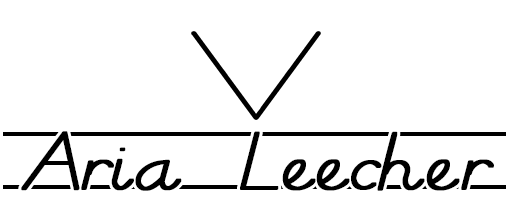
<style>
.page{position:relative;width:512px;height:216px;background:#ffffff}
.page>*{position:absolute;margin:0}
.t1{font:95.9px "BlockLettersTryout";letter-spacing:-0.06em;color:#000000;font-weight:bold}
.t2{font:95.9px "BlockLettersTryout";color:#000000;font-weight:bold}
</style>
<div class="page">
<p class="t1" style="left:21px;top:131px;width:473px;height:60px">Aria  <span class="t2">L</span>eecher</p>
</div>
